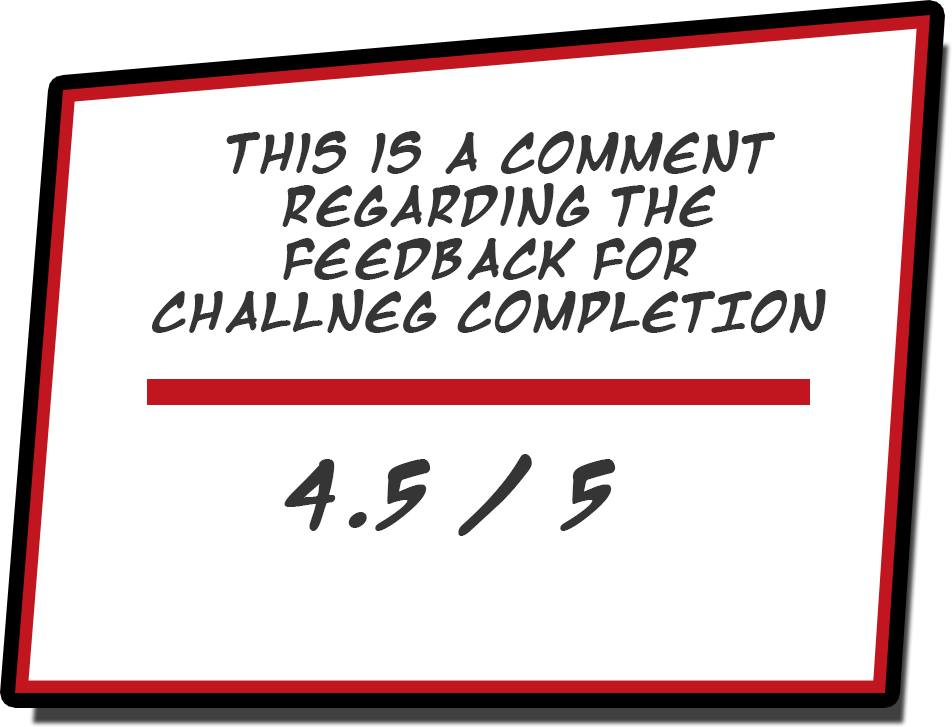
<style>
.page{position:relative;width:952px;height:727px;background:#ffffff}
.page>*{position:absolute;margin:0}
.t1{font:44px "MangaTempleBold";color:#353535}
.t2{font:75px "MangaTempleBold";color:#353535}
</style>
<div class="page">
<p class="t1" style="left:152px;top:130px;width:674px;height:203px;text-align:center">This is a comment<br>regarding the<br>feedback for <br>chaLLNEG COMPLETION</p>
<p class="t2" style="left:284px;top:454px;width:332px;height:82px">4.5 / 5</p>
</div>
